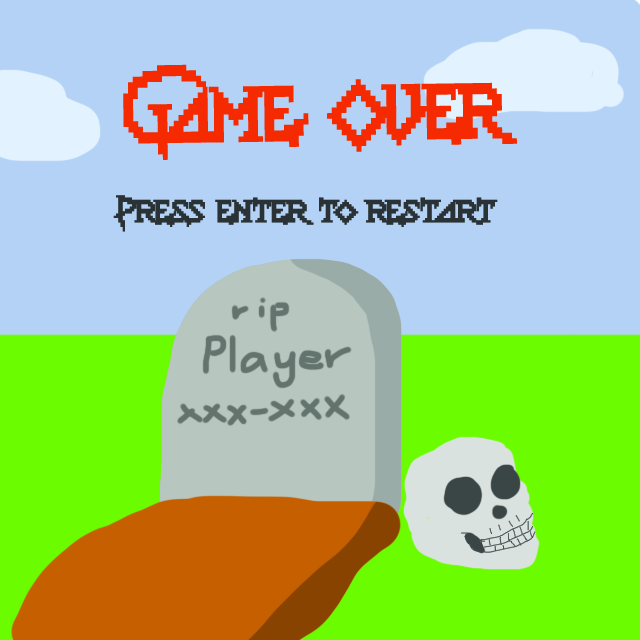
<style>
.page{position:relative;width:640px;height:640px;background:#b3d2f6}
.page>*{position:absolute;margin:0}
.t1{font:61.3px "Lady-Radical-2";letter-spacing:0.03em;color:#f52a00;scale:0.87 1}
.t2{font:25px "Lady-Radical-2";letter-spacing:0.03em;color:#2a3235}
</style>
<div class="page">
<p class="t1" style="left:123px;top:64px;width:394px;height:96px;rotate:-1deg">Game Over</p>
<p class="t2" style="left:113px;top:195px;width:385px;height:37px">Press enter to restart</p>
</div>
